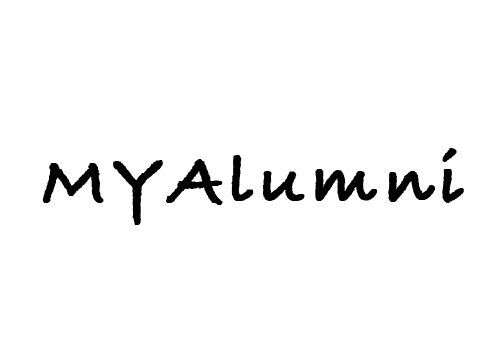
<style>
.page{position:relative;width:504px;height:360px;background:#ffffff}
.page>*{position:absolute;margin:0}
.t1{font:72px "BradleyHandITCTTBold";letter-spacing:0.08em;color:#000000;font-weight:bold}
</style>
<div class="page">
<p class="t1" style="left:42px;top:148px;width:422px;height:77px">MYAlumni</p>
</div>
